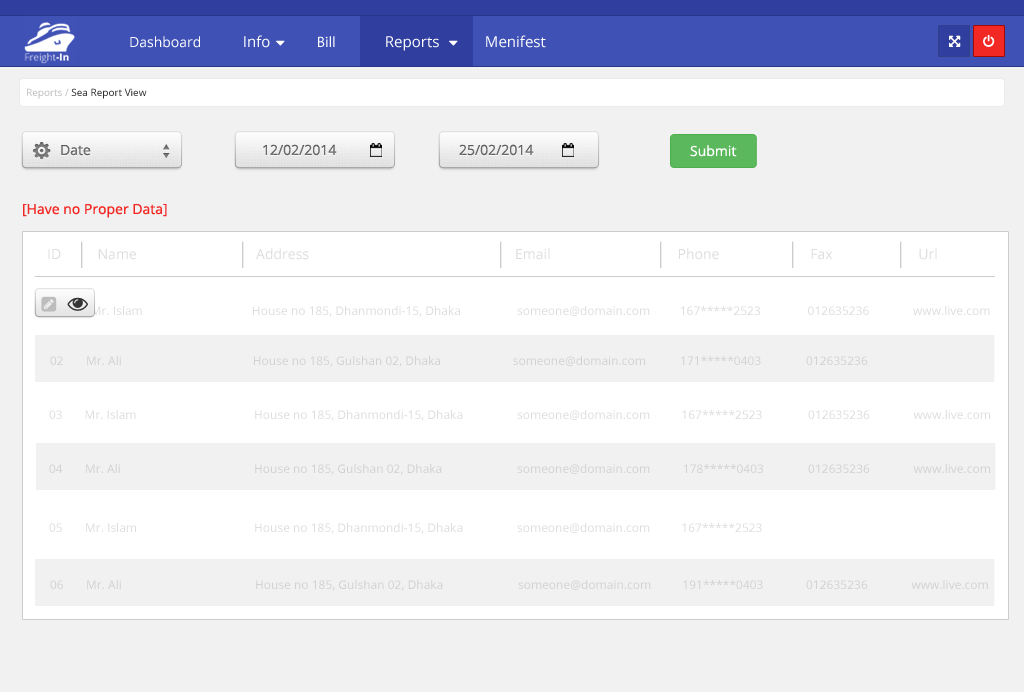
<style>
.page{position:relative;width:1024px;height:692px;background:#f1f1f1}
.page>*{position:absolute;margin:0}
.t1{font:14px "OpenSans";color:#ffffff}
.t2{font:15px "OpenSans";color:#ffffff}
.t3{font:15px "MyriadPro-Regular";color:#ffffff}
.t4{font:10px "OpenSans";color:#2c2b2b}
.t5{font:10px "OpenSans";color:#bebdbd}
.t6{font:14px "OpenSans";color:#666666}
.t7{font:14px "OpenSans";color:#808080}
.t8{font:14px "OpenSans";color:#f12823}
.t9{font:14px "OpenSans";color:#dddddd}
.t10{font:12px "OpenSans";color:#dddddd}
.t11{font:12px "OpenSans";color:#d1d1d1}
</style>
<div class="page">
<p class="t1" style="left:130px;top:36px;width:70px;height:12px">Dashboard</p>
<p class="t2" style="left:244px;top:35px;width:26px;height:13px">Info</p>
<p class="t3" style="left:318px;top:36px;width:17px;height:11px">Bill</p>
<p class="t2" style="left:386px;top:36px;width:53px;height:15px">Reports</p>
<p class="t2" style="left:486px;top:35px;width:60px;height:13px">Menifest</p>
<p class="t4" style="left:27px;top:88px;width:120px;height:11px"><span class="t5">Reports / </span>Sea Report View</p>
<p class="t6" style="left:61px;top:145px;width:30px;height:11px">Date</p>
<p class="t7" style="left:263px;top:144px;width:74px;height:12px">12/02/2014</p>
<p class="t7" style="left:459px;top:144px;width:75px;height:12px">25/02/2014</p>
<p class="t1" style="left:690px;top:145px;width:47px;height:12px">Submit</p>
<p class="t8" style="left:23px;top:204px;width:144px;height:14px">[Have no Proper Data]</p>
<p class="t9" style="left:48px;top:248px;width:889px;height:12px">ID     Name           Address      Email                  Phone     Fax     Url</p>
<p class="t10" style="left:49px;top:306px;width:941px;height:11px">01         Mr. Islam                                   House no 185, Dhanmondi-15, Dhaka   someone@domain.com       167*****2523               012635236              www.live.com</p>
<p class="t11" style="left:50px;top:356px;width:818px;height:11px">02 Mr. Ali                                          House no 185, Gulshan 02, Dhaka                       someone@domain.com           171*****0403  012635236</p>
<p class="t10" style="left:49px;top:410px;width:941px;height:11px">03       Mr. Islam           House no 185, Dhanmondi-15, Dhaka  someone@domain.com          167*****2523   012635236              www.live.com</p>
<p class="t11" style="left:49px;top:464px;width:941px;height:11px">04 Mr. Ali            House no 185, Gulshan 02, Dhaka   someone@domain.com        178*****0403   012635236              www.live.com</p>
<p class="t10" style="left:49px;top:523px;width:713px;height:11px">05 Mr. Islam           House no 185, Dhanmondi-15, Dhaka  someone@domain.com          167*****2523</p>
<p class="t11" style="left:50px;top:580px;width:938px;height:11px">06 Mr. Ali            House no 185, Gulshan 02, Dhaka   someone@domain.com          191*****0403  012635236              www.live.com</p>
</div>
